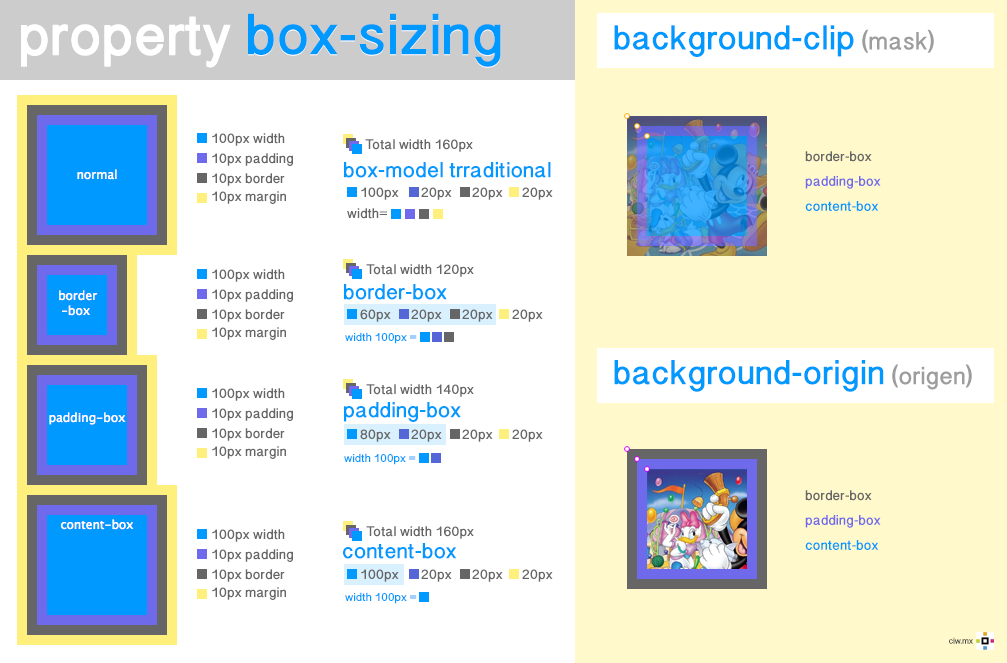
<style>
.page{position:relative;width:1007px;height:663px;background:#ffffff}
.page>*{position:absolute;margin:0}
.t1{font:65.3px "OriyaSangamMN-Bold";color:#0099ff}
.t2{font:65.3px "OriyaSangamMN-Bold";color:#ffffff}
.t3{font:39.1px "OriyaSangamMN-Bold";color:#0099ff}
.t4{font:28px "OriyaSangamMN-Bold";color:#9d9d9d}
.t5{font:15.6px "OriyaSangamMN-Bold";color:#666666}
.t6{font:15.6px/24.9px "OriyaSangamMN-Bold";color:#6f6aeb}
.t7{font:15.6px/24.9px "OriyaSangamMN-Bold";color:#666666}
.t8{font:15.6px/24.9px "OriyaSangamMN-Bold";color:#0099ff}
.t9{font:24.5px "OriyaSangamMN-Bold";color:#0099ff}
.t10{font:13px "OriyaSangamMN-Bold";color:#0099ff}
.t11{font:9.7px "OriyaSangamMN-Bold";color:#494949}
</style>
<div class="page">
<p class="t1" style="left:21px;top:13px;width:480px;height:54px"><span class="t2">property</span> box-sizing</p>
<p class="t3" style="left:614px;top:25px;width:320px;height:32px">background-clip<span class="t4"> (mask)</span></p>
<p class="t5" style="left:212px;top:133px;width:73px;height:13px">100px width</p>
<p class="t5" style="left:365px;top:139px;width:108px;height:13px">Total width 160px</p>
<p class="t5" style="left:212px;top:153px;width:81px;height:13px">10px padding</p>
<p class="t6" style="left:805px;top:151px;width:76px;height:60px"><span class="t7">border-box<br></span>padding-box<br><span class="t8">content-box</span></p>
<p class="t5" style="left:212px;top:173px;width:73px;height:13px">10px border</p>
<p class="t9" style="left:344px;top:162px;width:207px;height:16px">box-model trraditional</p>
<p class="t5" style="left:212px;top:191px;width:74px;height:13px">10px margin</p>
<p class="t5" style="left:361px;top:187px;width:38px;height:13px">100px</p>
<p class="t5" style="left:421px;top:187px;width:31px;height:13px">20px</p>
<p class="t5" style="left:472px;top:187px;width:31px;height:13px">20px</p>
<p class="t5" style="left:522px;top:187px;width:31px;height:13px">20px</p>
<p class="t5" style="left:347px;top:208px;width:40px;height:11px">width=</p>
<p class="t5" style="left:212px;top:269px;width:73px;height:13px">100px width</p>
<p class="t5" style="left:366px;top:264px;width:108px;height:13px">Total width 120px</p>
<p class="t5" style="left:212px;top:289px;width:81px;height:13px">10px padding</p>
<p class="t9" style="left:344px;top:284px;width:103px;height:16px">border-box</p>
<p class="t5" style="left:212px;top:309px;width:73px;height:13px">10px border</p>
<p class="t5" style="left:360px;top:309px;width:31px;height:13px">60px</p>
<p class="t5" style="left:411px;top:309px;width:31px;height:13px">20px</p>
<p class="t5" style="left:462px;top:309px;width:31px;height:13px">20px</p>
<p class="t5" style="left:512px;top:309px;width:31px;height:13px">20px</p>
<p class="t5" style="left:212px;top:327px;width:74px;height:13px">10px margin</p>
<p class="t10" style="left:345px;top:332px;width:72px;height:12px">width 100px =</p>
<p class="t3" style="left:614px;top:360px;width:358px;height:32px">background-origin <span class="t4">(origen)</span></p>
<p class="t5" style="left:212px;top:388px;width:73px;height:13px">100px width</p>
<p class="t5" style="left:366px;top:384px;width:108px;height:13px">Total width 140px</p>
<p class="t5" style="left:212px;top:408px;width:81px;height:13px">10px padding</p>
<p class="t9" style="left:344px;top:402px;width:117px;height:20px">padding-box</p>
<p class="t5" style="left:212px;top:428px;width:73px;height:13px">10px border</p>
<p class="t5" style="left:360px;top:429px;width:31px;height:13px">80px</p>
<p class="t5" style="left:411px;top:429px;width:31px;height:13px">20px</p>
<p class="t5" style="left:462px;top:429px;width:31px;height:13px">20px</p>
<p class="t5" style="left:512px;top:429px;width:31px;height:13px">20px</p>
<p class="t5" style="left:212px;top:446px;width:74px;height:13px">10px margin</p>
<p class="t10" style="left:344px;top:453px;width:72px;height:12px">width 100px =</p>
<p class="t6" style="left:805px;top:490px;width:76px;height:60px"><span class="t7">border-box<br></span>padding-box<br><span class="t8">content-box</span></p>
<p class="t5" style="left:212px;top:529px;width:73px;height:13px">100px width</p>
<p class="t5" style="left:366px;top:526px;width:108px;height:13px">Total width 160px</p>
<p class="t9" style="left:343px;top:543px;width:114px;height:16px">content-box</p>
<p class="t5" style="left:212px;top:549px;width:81px;height:13px">10px padding</p>
<p class="t5" style="left:212px;top:569px;width:73px;height:13px">10px border</p>
<p class="t5" style="left:361px;top:569px;width:38px;height:13px">100px</p>
<p class="t5" style="left:421px;top:569px;width:31px;height:13px">20px</p>
<p class="t5" style="left:472px;top:569px;width:31px;height:13px">20px</p>
<p class="t5" style="left:522px;top:569px;width:31px;height:13px">20px</p>
<p class="t5" style="left:212px;top:587px;width:74px;height:13px">10px margin</p>
<p class="t10" style="left:345px;top:592px;width:72px;height:12px">width 100px =</p>
<p class="t11" style="left:949px;top:637px;width:24px;height:7px">ciw.mx</p>
</div>
